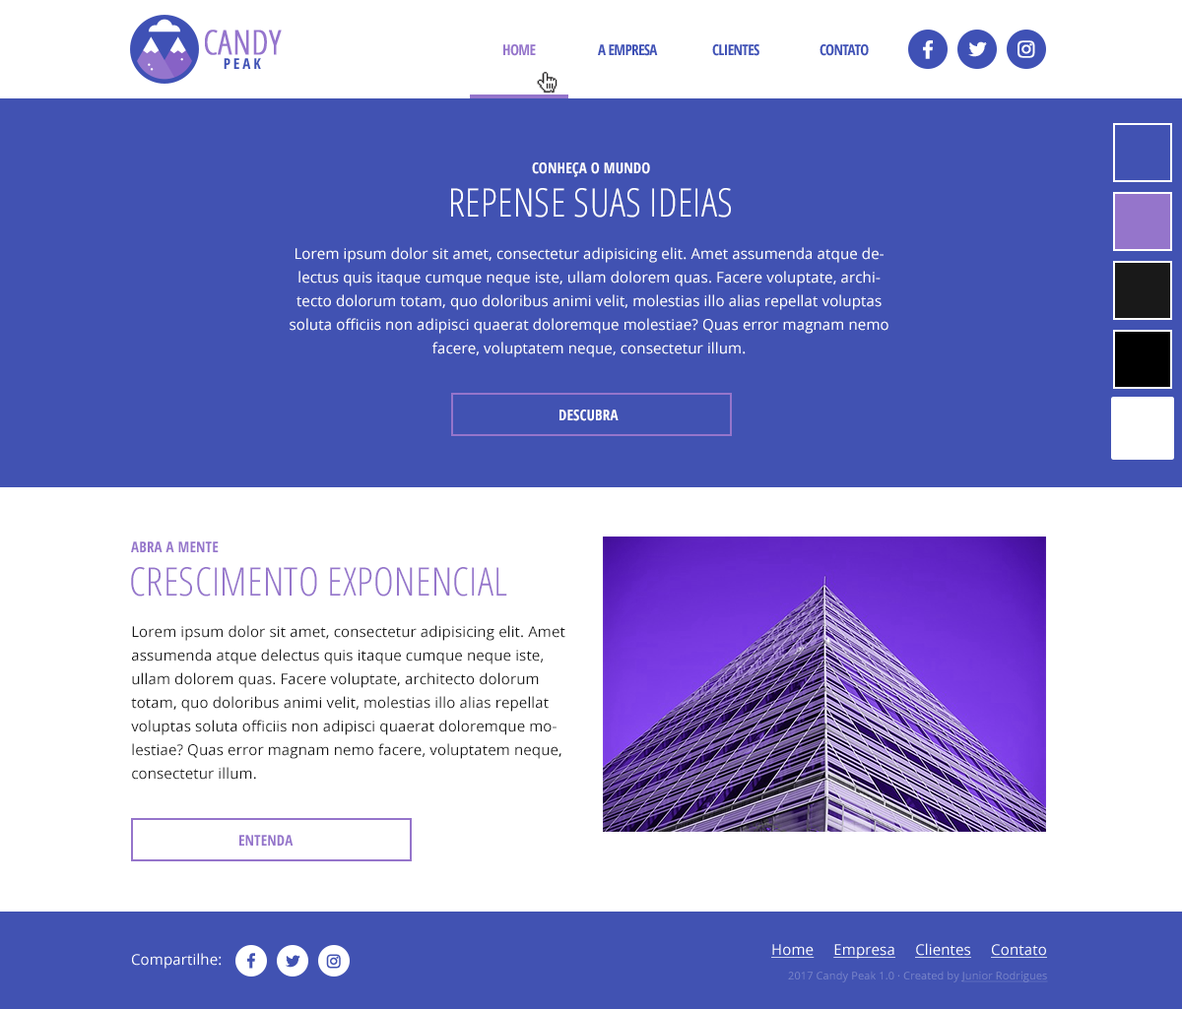
<style>
.page{position:relative;width:1182px;height:1009px;background:#4152b2}
.page>*{position:absolute;margin:0}
.t1{font:14.8px "OpenSansCondensed-Bold";letter-spacing:0.01em;color:#fffefe;text-transform:uppercase}
.t2{font:39.4px "OpenSansCondensed-Light";letter-spacing:0.01em;color:#ffffff;text-transform:uppercase}
.t3{font:14.8px/23.6px "OpenSans-Regular";letter-spacing:0.01em;color:#ffffff}
.t4{font:14.8px "OpenSansCondensed-Bold";letter-spacing:0.01em;color:#9575cb;text-transform:uppercase}
.t5{font:39.4px "OpenSansCondensed-Light";letter-spacing:0.01em;color:#9575cb;text-transform:uppercase}
.t6{font:14.8px/23.6px "OpenSans-Regular";letter-spacing:0.01em;color:#191919}
</style>
<div class="page">
<p class="t1" style="left:532px;top:162px;width:118px;height:15px">conheça o mundo</p>
<p class="t2" style="left:451px;top:188px;width:280px;height:30px">REPENSE SUAS IDEIAS</p>
<p class="t3" style="left:289px;top:247px;width:599px;height:110px;text-align:center">Lorem ipsum dolor sit amet, consectetur adipisicing elit. Amet assumenda atque delectus quis itaque cumque neque iste, ullam dolorem quas. Facere voluptate, architecto dolorum totam, quo doloribus animi velit, molestias illo alias repellat voluptas soluta officiis non adipisci quaerat doloremque molestiae? Quas error magnam nemo facere, voluptatem neque, consectetur illum.</p>
<p class="t1" style="left:559px;top:410px;width:59px;height:11px">DESCUBRA</p>
<p class="t4" style="left:131px;top:542px;width:88px;height:10px">abra a mente</p>
<p class="t5" style="left:131px;top:567px;width:376px;height:30px">crescimento exponencial</p>
<p class="t6" style="left:131px;top:625px;width:434px;height:155px">Lorem ipsum dolor sit amet, consectetur adipisicing elit. Amet assumenda atque delectus quis itaque cumque neque iste, ullam dolorem quas. Facere voluptate, architecto dolorum totam, quo doloribus animi velit, molestias illo alias repellat voluptas soluta officiis non adipisci quaerat doloremque molestiae? Quas error magnam nemo facere, voluptatem neque, consectetur illum.</p>
<p class="t4" style="left:239px;top:835px;width:54px;height:11px">entenda</p>
</div>
